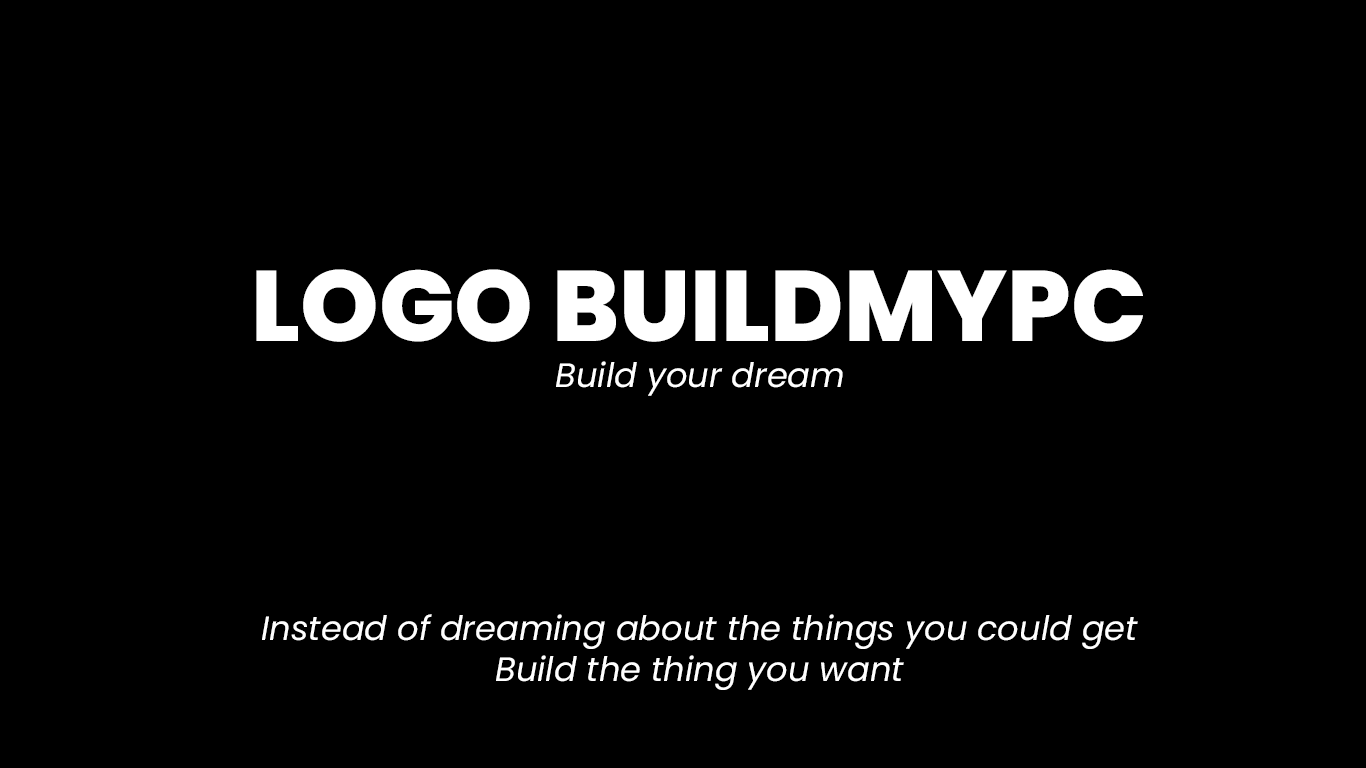
<style>
.page{position:relative;width:1366px;height:768px;background:#000000}
.page>*{position:absolute;margin:0}
.t1{font:100px "Poppins-ExtraBold";color:#ffffff}
.t2{font:33.6px "Poppins-Italic";color:#ffffff}
</style>
<div class="page">
<p class="t1" style="left:256px;top:269px;width:887px;height:73px">LOGO BUILDMYPC</p>
<p class="t2" style="left:556px;top:361px;width:287px;height:35px">Build your dream</p>
<p class="t2" style="left:262px;top:614px;width:876px;height:76px;text-align:center">Instead of dreaming about the things you could get<br>Build the thing you want</p>
</div>
